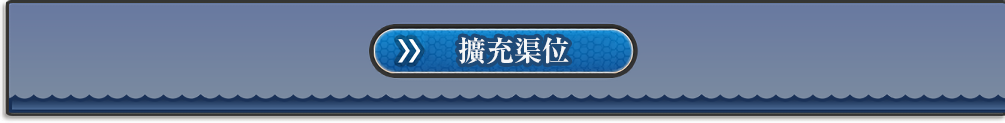
<style>
.page{position:relative;width:1005px;height:123px}
.page>*{position:absolute;margin:0}
.t1{font:28px "RyuminPr6N-ExBold";color:#f5f7f8}
</style>
<div class="page">
<p class="t1" style="left:458px;top:37px;width:111px;height:27px">拡充渠位</p>
</div>
